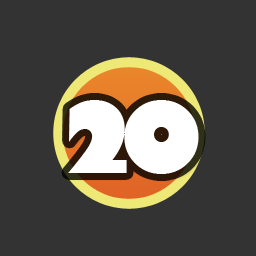
<style>
.page{position:relative;width:256px;height:256px;background:#333333}
.page>*{position:absolute;margin:0}
.t1{font:96.9px "GillSans-UltraBold";letter-spacing:-0.2em;color:#ffffff}
</style>
<div class="page">
<p class="t1" style="left:68px;top:100px;width:131px;height:74px">20</p>
</div>
